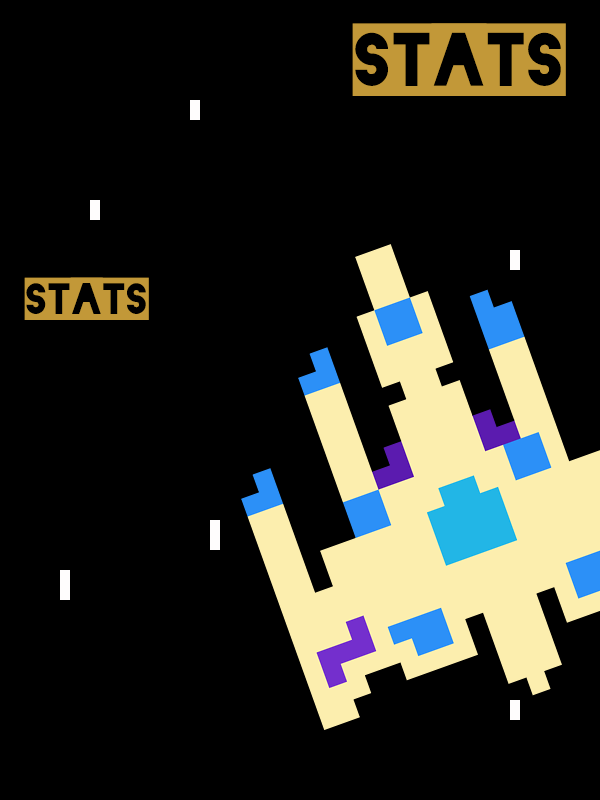
<style>
.page{position:relative;width:600px;height:800px;background:#000000}
.page>*{position:absolute;margin:0}
.t1{font:86.2px "Blackout-2AM";color:#c29838}
.t2{font:50.1px "Blackout-2AM";color:#c29838}
</style>
<div class="page">
<p class="t1" style="left:352px;top:23px;width:214px;height:73px">stats</p>
<p class="t2" style="left:24px;top:277px;width:125px;height:43px">stats</p>
</div>
